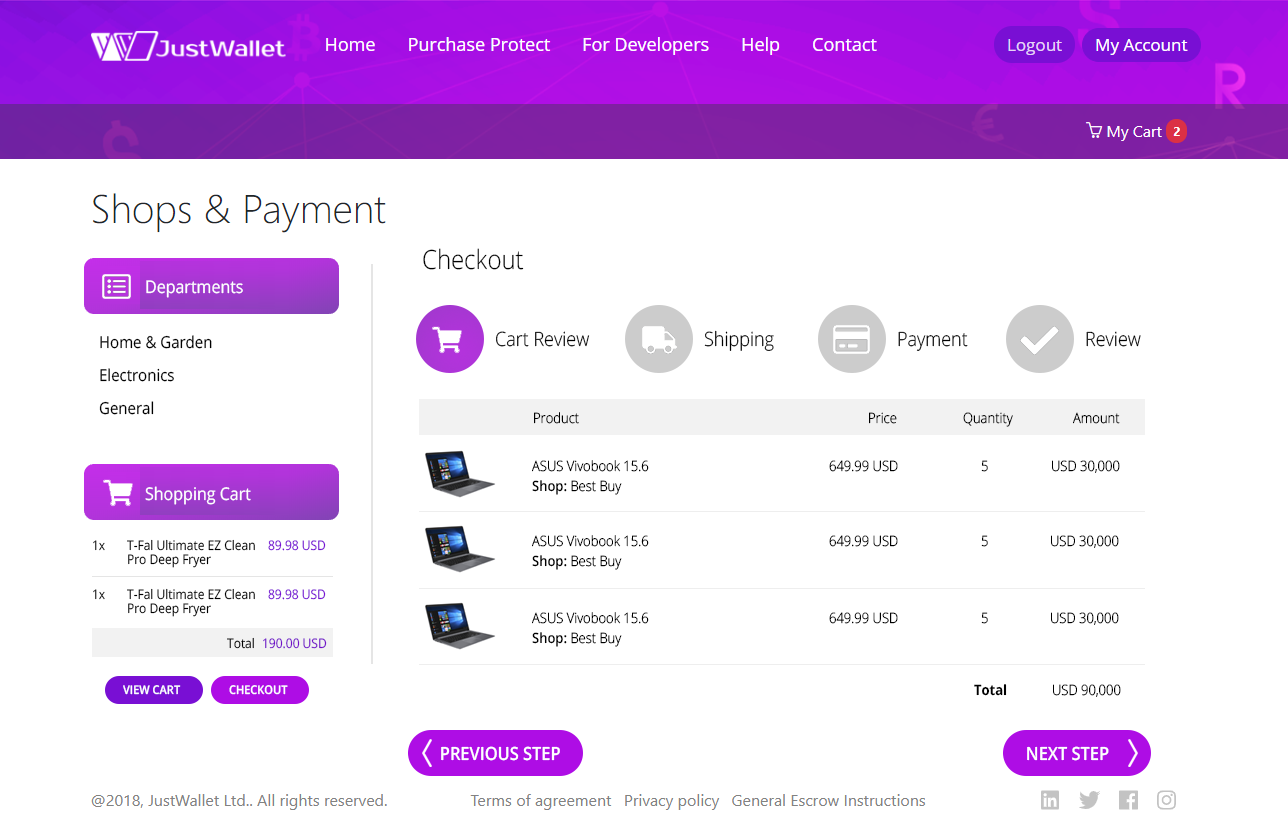
<style>
.page{position:relative;width:1288px;height:827px;background:#ffffff}
.page>*{position:absolute;margin:0}
.t1{font:26.4px "OpenSans-Light";color:#000000;scale:0.91 1}
.t2{font:17.6px "OpenSans";color:#ffffff;scale:0.91 1}
.t3{font:16.5px/33px "OpenSans";color:#000000;scale:0.91 1}
.t4{font:19.8px "OpenSans-Light";color:#000000;scale:0.91 1}
.t5{font:14.3px "OpenSans-Light";color:#000000;scale:0.91 1}
.t6{font:14.3px "OpenSans-Semibold";color:#000000;scale:0.91 1}
.t7{font:13.2px "OpenSans";scale:0.91 1}
.t8{font:13.2px "OpenSans";color:#000000;scale:0.91 1}
.t9{font:13.2px "OpenSans";color:#790fd4;scale:0.91 1}
.t10{font:13.2px "OpenSans";color:#730ec9;scale:0.91 1}
.t11{font:12.1px "OpenSans-Semibold";color:#ffffff;text-transform:uppercase;scale:0.91 1}
.t12{font:14.3px "OpenSans-Bold";color:#000000;scale:0.91 1}
.t13{font:18.2px "OpenSans-Semibold";color:#ffffff;text-transform:uppercase;scale:0.9 1}
</style>
<div class="page">
<p class="t1" style="left:423px;top:248px;width:101px;height:22px">Checkout</p>
<p class="t2" style="left:146px;top:280px;width:97px;height:18px">Departments</p>
<p class="t3" style="left:99px;top:335px;width:113px;height:80px">Home &amp; Garden<br>Electronics<br>General</p>
<p class="t4" style="left:496px;top:331px;width:94px;height:16px">Cart Review</p>
<p class="t4" style="left:704px;top:330px;width:70px;height:21px">Shipping</p>
<p class="t4" style="left:898px;top:331px;width:70px;height:20px">Payment</p>
<p class="t4" style="left:1086px;top:331px;width:55px;height:16px">Review</p>
<p class="t5" style="left:534px;top:412px;width:45px;height:12px">Product</p>
<p class="t5" style="left:869px;top:412px;width:28px;height:12px">Price</p>
<p class="t5" style="left:963px;top:412px;width:50px;height:15px">Quantity</p>
<p class="t5" style="left:1073px;top:412px;width:47px;height:12px">Amount</p>
<p class="t5" style="left:532px;top:460px;width:117px;height:12px">ASUS Vivobook 15.6</p>
<p class="t5" style="left:829px;top:460px;width:69px;height:12px">649.99 USD</p>
<p class="t5" style="left:981px;top:460px;width:7px;height:12px">5</p>
<p class="t5" style="left:1052px;top:460px;width:68px;height:13px">USD 30,000</p>
<p class="t2" style="left:145px;top:486px;width:106px;height:19px">Shopping Cart</p>
<p class="t5" style="left:532px;top:480px;width:90px;height:15px"><span class="t6">Shop: </span>Best Buy</p>
<p class="t7" style="left:93px;top:540px;width:12px;height:11px">1x</p>
<p class="t8" style="left:127px;top:539px;width:128px;height:29px">T-Fal Ultimate EZ Clean <br>Pro Deep Fryer</p>
<p class="t9" style="left:268px;top:540px;width:58px;height:11px">89.98 USD</p>
<p class="t5" style="left:532px;top:535px;width:117px;height:12px">ASUS Vivobook 15.6</p>
<p class="t5" style="left:829px;top:535px;width:69px;height:12px">649.99 USD</p>
<p class="t5" style="left:981px;top:535px;width:7px;height:12px">5</p>
<p class="t5" style="left:1051px;top:535px;width:68px;height:13px">USD 30,000</p>
<p class="t5" style="left:532px;top:555px;width:90px;height:15px"><span class="t6">Shop: </span>Best Buy</p>
<p class="t7" style="left:93px;top:589px;width:12px;height:11px">1x</p>
<p class="t8" style="left:127px;top:588px;width:128px;height:29px">T-Fal Ultimate EZ Clean <br>Pro Deep Fryer</p>
<p class="t9" style="left:268px;top:589px;width:58px;height:11px">89.98 USD</p>
<p class="t5" style="left:532px;top:612px;width:117px;height:12px">ASUS Vivobook 15.6</p>
<p class="t5" style="left:829px;top:612px;width:69px;height:12px">649.99 USD</p>
<p class="t5" style="left:981px;top:612px;width:7px;height:12px">5</p>
<p class="t5" style="left:1051px;top:612px;width:68px;height:13px">USD 30,000</p>
<p class="t8" style="left:227px;top:637px;width:27px;height:12px">Total</p>
<p class="t10" style="left:263px;top:638px;width:64px;height:11px">190.00 USD</p>
<p class="t5" style="left:532px;top:632px;width:90px;height:15px"><span class="t6">Shop: </span>Best Buy</p>
<p class="t11" style="left:123px;top:685px;width:58px;height:10px">View Cart</p>
<p class="t11" style="left:229px;top:685px;width:59px;height:10px">CHECKOUT</p>
<p class="t12" style="left:974px;top:684px;width:33px;height:12px">Total</p>
<p class="t5" style="left:1053px;top:684px;width:68px;height:13px">USD 90,000</p>
<p class="t13" style="left:441px;top:746px;width:119px;height:15px">Previous Step</p>
<p class="t13" style="left:1027px;top:746px;width:82px;height:15px">Next Step</p>
</div>
